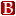
<style>
.page{position:relative;width:16px;height:16px;background:#ffffff}
.page>*{position:absolute;margin:0}
.t1{font:20px "FootlightMTLight";letter-spacing:-0.05em;color:#ffffff}
</style>
<div class="page">
<p class="t1" style="left:3px;top:2px;width:10px;height:12px">B</p>
</div>
